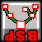
<style>
.page{position:relative;width:42px;height:42px}
.page>*{position:absolute;margin:0}
.t1{font:13.7px "Arial-Black";letter-spacing:-0.075em;color:#ff0000}
</style>
<div class="page">
<p class="t1" style="left:4px;top:30px;width:33px;height:11px;rotate:-180deg">B S P</p>
</div>
